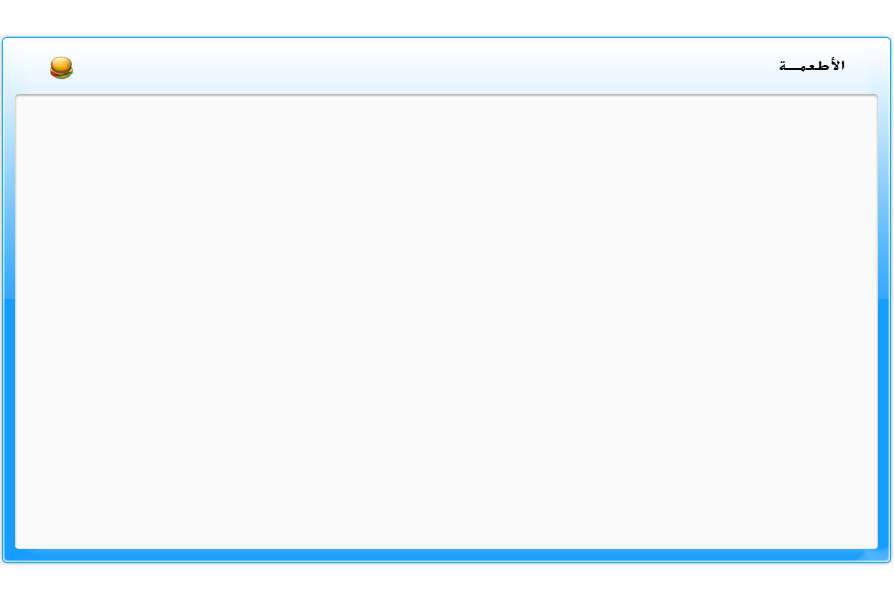
<style>
.page{position:relative;width:894px;height:600px;background:#fafafa}
.page>*{position:absolute;margin:0}
.t1{font:14.9px "BoutrosAdsMedium";color:#0c0b0b;scale:1.13 1}
</style>
<div class="page">
<p class="t1" style="left:779px;top:57px;width:66px;height:15px">الأطعمـة</p>
</div>
